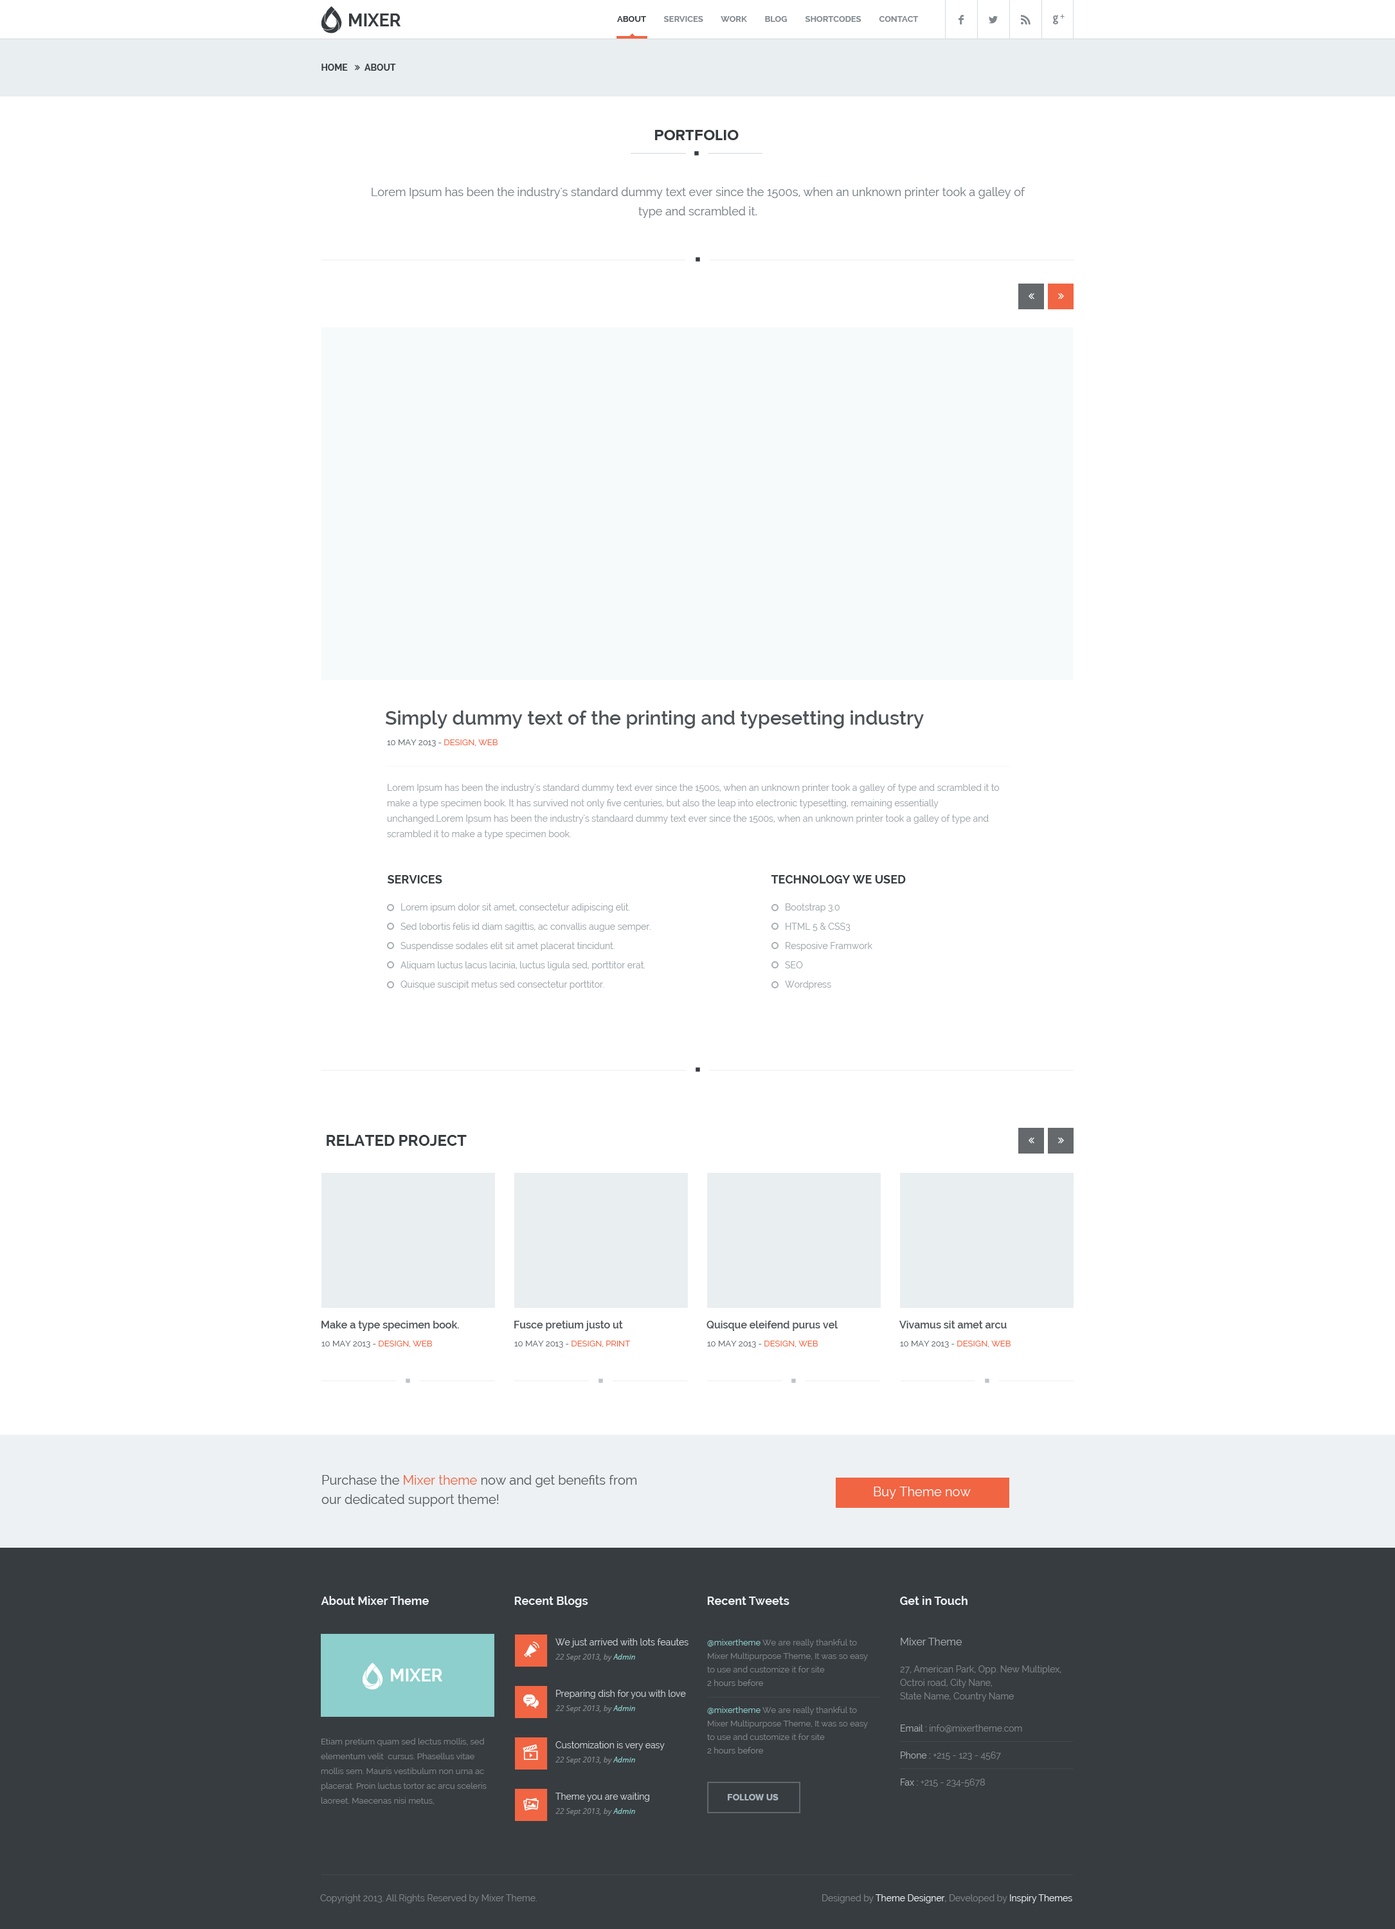
<style>
.page{position:relative;width:1395px;height:1929px;background:#ffffff}
.page>*{position:absolute;margin:0}
.t1{font:17.4px "Raleway-Bold";color:#373c40}
.t2{font:8.4px "Raleway-Bold";color:#80878d;text-transform:uppercase}
.t3{font:8.4px "Raleway-Bold";color:#373c40;text-transform:uppercase}
.t4{font:15.4px "Socialico";color:#80878d}
.t5{font:9px "ProximaNovaA-Regular";color:#80878d}
.t6{font:9px "Raleway-Bold";color:#373c40;text-transform:uppercase}
.t7{font:15.4px "ProximaNova-Bold";color:#373c40;text-transform:uppercase}
.t8{font:11.6px/19.3px "Raleway";color:#7d8489}
.t9{font:19.3px "Raleway-SemiBold";color:#4f5458}
.t10{font:8.4px "Raleway";color:#687075}
.t11{font:8.4px "Raleway";color:#f16543}
.t12{font:9px/15.4px "Raleway";color:#a3a9ad}
.t13{font:11.6px "Raleway-Bold";color:#373c40;text-transform:uppercase}
.t14{font:9px/19.3px "Raleway";color:#a3a9ad}
.t15{font:15.4px "Raleway-Bold";color:#373c40;text-transform:uppercase}
.t16{font:10.3px "Raleway-SemiBold";color:#4f5458}
.t17{font:12.9px/19.3px "Raleway";color:#55595c}
.t18{font:12.9px/19.3px "Raleway";color:#f16543}
.t19{font:12.9px "Raleway";color:#ffffff}
.t20{font:11.6px "Raleway-Bold";color:#edf1f4}
.t21{font:9px/13.5px "Raleway";color:#7d8489}
.t22{font:10.3px/13.5px "Raleway";color:#a5a9ad}
.t23{font:9px "Raleway";color:#cdd1d4}
.t24{font:8.4px/13.5px "Raleway";color:#7d8489}
.t25{font:8.4px/13.5px "Raleway";color:#8ccfcc}
.t26{font:8.4px/13.5px "Raleway";color:#82878b}
.t27{font:7.7px "OpenSans-Italic";color:#82878b}
.t28{font:7.7px "OpenSans-Italic";color:#8ccfcc}
.t29{font:17.4px "Raleway-Bold";color:#ffffff}
.t30{font:9px/13.5px "Raleway";color:#a5a9ad}
.t31{font:8.4px/14.8px "Raleway";color:#7d8489}
.t32{font:9px "ProximaNova-Extrabld";color:#a9b3bc}
.t33{font:9px "Raleway";color:#7d8489}
.t34{font:9px "Raleway";color:#edf1f4}
</style>
<div class="page">
<p class="t1" style="left:349px;top:14px;width:52px;height:12px">MIXER</p>
<p class="t2" style="left:617px;top:16px;width:302px;height:6px"><span class="t3">About         </span>Services         Work         Blog         Shortcodes         Contact</p>
<p class="t4" style="left:959px;top:15px;width:5px;height:9px">F</p>
<p class="t4" style="left:989px;top:15px;width:9px;height:9px">L</p>
<p class="t4" style="left:1021px;top:15px;width:9px;height:9px">R</p>
<p class="t4" style="left:1053px;top:15px;width:5px;height:9px">G</p>
<p class="t5" style="left:1060px;top:14px;width:5px;height:5px">+</p>
<p class="t6" style="left:321px;top:64px;width:75px;height:7px">home        About</p>
<p class="t7" style="left:655px;top:130px;width:84px;height:10px">portfolio</p>
<p class="t8" style="left:372px;top:187px;width:653px;height:31px;text-align:center">Lorem Ipsum has been the industry's standard dummy text ever since the 1500s, when an unknown printer took a galley of type and scrambled it.</p>
<p class="t9" style="left:385px;top:710px;width:539px;height:18px">Simply dummy text of the printing and typesetting industry</p>
<p class="t10" style="left:387px;top:739px;width:111px;height:7px">10 MAY 2013 - <span class="t11">DESIGN, WEB</span></p>
<p class="t12" style="left:387px;top:784px;width:613px;height:55px">Lorem Ipsum has been the industry's standard dummy text ever since the 1500s, when an unknown printer took a galley of type and scrambled it to make a type specimen book. It has survived not only five centuries, but also the leap into electronic typesetting, remaining essentially unchanged.Lorem Ipsum has been the industry's standaard dummy text ever since the 1500s, when an unknown printer took a galley of type and scrambled it to make a type specimen book.</p>
<p class="t13" style="left:387px;top:875px;width:55px;height:8px">services</p>
<p class="t13" style="left:771px;top:875px;width:135px;height:8px">Technology we used</p>
<p class="t14" style="left:401px;top:903px;width:250px;height:86px">Lorem ipsum dolor sit amet, consectetur adipiscing elit.<br>Sed lobortis felis id diam sagittis, ac convallis augue semper.<br>Suspendisse sodales elit sit amet placerat tincidunt.<br>Aliquam luctus lacus lacinia, luctus ligula sed, porttitor erat.<br>Quisque suscipit metus sed consectetur porttitor.</p>
<p class="t14" style="left:785px;top:903px;width:87px;height:86px">Bootstrap 3.0<br>HTML 5 &amp; CSS3<br>Resposive Framwork<br>SEO<br>Wordpress</p>
<p class="t15" style="left:327px;top:1135px;width:140px;height:11px">related project</p>
<p class="t16" style="left:321px;top:1320px;width:138px;height:11px">Make a type specimen book.</p>
<p class="t16" style="left:514px;top:1320px;width:109px;height:11px">Fusce pretium justo ut</p>
<p class="t16" style="left:706px;top:1320px;width:132px;height:11px">Quisque eleifend purus vel</p>
<p class="t16" style="left:899px;top:1320px;width:108px;height:8px">Vivamus sit amet arcu</p>
<p class="t10" style="left:321px;top:1340px;width:111px;height:7px">10 MAY 2013 - <span class="t11">DESIGN, WEB</span></p>
<p class="t10" style="left:514px;top:1340px;width:117px;height:7px">10 MAY 2013 - <span class="t11">DESIGN, PRINT</span></p>
<p class="t10" style="left:707px;top:1340px;width:111px;height:7px">10 MAY 2013 - <span class="t11">DESIGN, WEB</span></p>
<p class="t10" style="left:900px;top:1340px;width:111px;height:7px">10 MAY 2013 - <span class="t11">DESIGN, WEB</span></p>
<p class="t17" style="left:321px;top:1475px;width:316px;height:31px">Purchase the <span class="t18">Mixer theme</span> now and get benefits from <br>our dedicated support theme!</p>
<p class="t19" style="left:874px;top:1486px;width:97px;height:12px">Buy Theme now</p>
<p class="t20" style="left:321px;top:1596px;width:108px;height:9px">About Mixer Theme</p>
<p class="t20" style="left:514px;top:1596px;width:74px;height:11px">Recent Blogs</p>
<p class="t20" style="left:707px;top:1596px;width:82px;height:9px">Recent Tweets</p>
<p class="t20" style="left:900px;top:1596px;width:68px;height:9px">Get in Touch</p>
<p class="t21" style="left:900px;top:1637px;width:161px;height:64px"><span class="t22">Mixer Theme<br><br></span>27, American Park, Opp. New Multiplex,<br>Octroi road, City Nane,<br>State Name, Country Name</p>
<p class="t23" style="left:555px;top:1638px;width:133px;height:9px">We just arrived with lots feautes</p>
<p class="t24" style="left:707px;top:1639px;width:161px;height:114px"><span class="t25">@mixertheme </span>We are really thankful to <br>Mixer Multipurpose Theme, It was so easy <br>to use and customize it for site<br><span class="t26">2 hours before<br><br></span><span class="t25">@mixertheme </span>We are really thankful to <br>Mixer Multipurpose Theme, It was so easy <br>to use and customize it for site<br><span class="t26">2 hours before</span></p>
<p class="t27" style="left:555px;top:1653px;width:80px;height:8px">22 Sept 2013, by <span class="t28">Admin</span></p>
<p class="t29" style="left:391px;top:1668px;width:52px;height:13px">MIXER</p>
<p class="t23" style="left:556px;top:1689px;width:130px;height:9px">Preparing dish for you with love</p>
<p class="t27" style="left:555px;top:1705px;width:80px;height:8px">22 Sept 2013, by <span class="t28">Admin</span></p>
<p class="t21" style="left:901px;top:1724px;width:121px;height:63px"><span class="t30">Email : </span>info@mixertheme.com<br><span class="t30"><br>Phone : </span>+215 - 123 - 4567<br><span class="t30"><br>Fax : </span>+215 - 234-5678</p>
<p class="t31" style="left:321px;top:1738px;width:166px;height:66px">Etiam pretium quam sed lectus mollis, sed <br>elementum velit  cursus. Phasellus vitae <br>mollis sem. Mauris vestibulum non urna ac <br>placerat. Proin luctus tortor ac arcu sceleris <br>laoreet. Maecenas nisi metus,</p>
<p class="t23" style="left:555px;top:1741px;width:110px;height:9px">Customization is very easy</p>
<p class="t27" style="left:555px;top:1756px;width:80px;height:8px">22 Sept 2013, by <span class="t28">Admin</span></p>
<p class="t23" style="left:555px;top:1792px;width:94px;height:9px">Theme you are waiting</p>
<p class="t32" style="left:728px;top:1794px;width:51px;height:6px">FOLLOW US</p>
<p class="t27" style="left:555px;top:1808px;width:80px;height:7px">22 Sept 2013, by <span class="t28">Admin</span></p>
<p class="t33" style="left:320px;top:1894px;width:217px;height:9px">Copyright 2013. All Rights Reserved by Mixer Theme.</p>
<p class="t34" style="left:822px;top:1894px;width:250px;height:9px"><span class="t33">Designed by </span>Theme Designer<span class="t33">, Developed by </span>Inspiry Themes</p>
</div>
